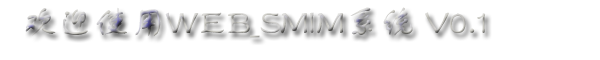
<style>
.page{position:relative;width:600px;height:60px;background:#ffffff}
.page>*{position:absolute;margin:0}
.t1{font:36px "FZSTK--GBK1-0"}
</style>
<div class="page">
<p class="t1" style="left:25px;top:7px;width:461px;height:31px">欢迎使用WEB_SMIM系统 V0.1</p>
</div>
